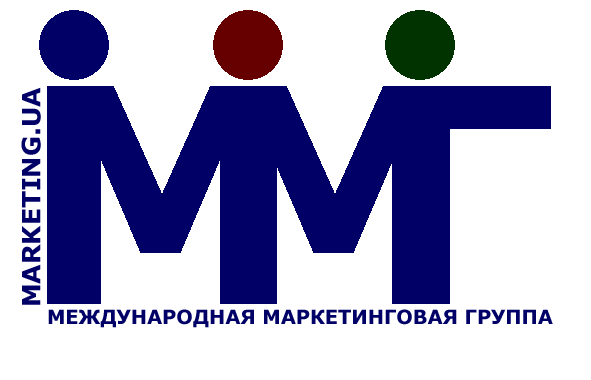
<style>
.page{position:relative;width:591px;height:380px;background:#ffffff}
.page>*{position:absolute;margin:0}
.t1{font:25px "Verdana-Bold";color:#000066}
.t2{font:19.4px "Verdana-Bold";color:#000066}
</style>
<div class="page">
<p class="t1" style="left:21px;top:87px;width:20px;height:218px;rotate:-90deg">MARKETING.UA</p>
<p class="t2" style="left:48px;top:309px;width:505px;height:19px">МЕЖДУНАРОДНАЯ МАРКЕТИНГОВАЯ ГРУППА</p>
</div>
